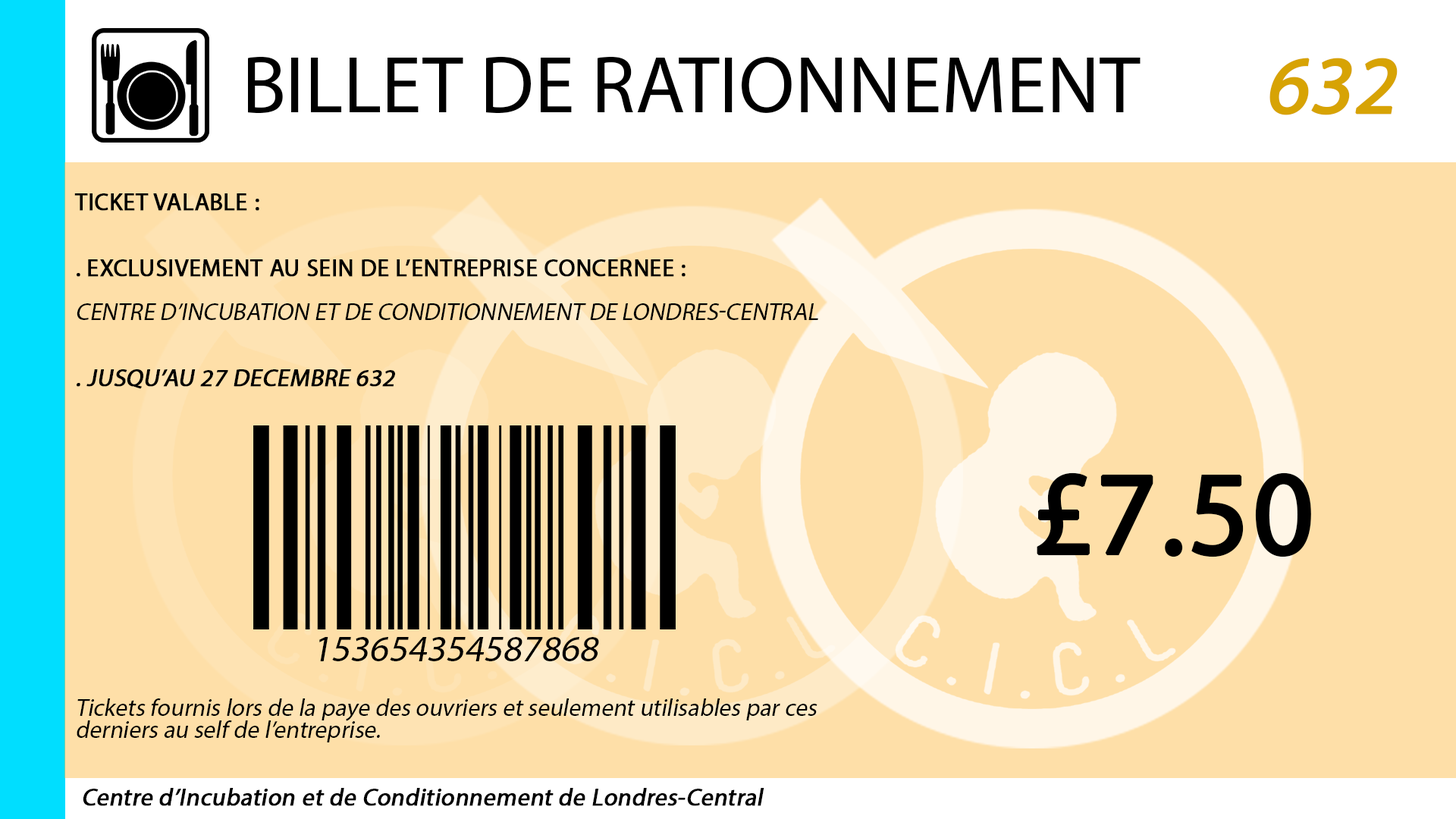
<style>
.page{position:relative;width:1456px;height:819px;background:#fedfa8}
.page>*{position:absolute;margin:0}
.t1{font:81.1px "MyriadPro-Regular";color:#000000}
.t2{font:81.1px "MyriadPro-Regular";color:#d7a304;font-weight:bold;font-style:italic}
.t3{font:24.3px/22px "MyriadPro-Regular";color:#000000;font-style:italic}
.t4{font:24.3px/22px "MyriadPro-Regular";color:#000000;font-weight:bold}
.t5{font:24.3px/22px "MyriadPro-Regular";color:#000000;text-transform:uppercase;font-style:italic}
.t6{font:24.3px/22px "MyriadPro-Regular";color:#000000;font-weight:bold;font-style:italic}
.t7{font:119.1px "MyriadPro-Regular";color:#000000;font-weight:bold}
.t8{font:37.2px "MyriadPro-Regular";color:#000000;font-style:italic}
.t9{font:24.3px "MyriadPro-Regular";color:#000000;font-weight:bold;font-style:italic}
</style>
<div class="page">
<p class="t1" style="left:248px;top:56px;width:893px;height:58px">BILLET DE RATIONNEMENT</p>
<p class="t2" style="left:1269px;top:58px;width:129px;height:57px">632</p>
<p class="t3" style="left:74px;top:193px;width:744px;height:549px"><span class="t4">TICKET VALABLE :<br><br><br>. EXCLUSIVEMENT AU SEIN DE L’ENTREPRISE CONCERNEE : <br><br></span><span class="t5">Centre d’Incubation et de Conditionnement de Londres-Central<br></span><span class="t6"><br><br>. JUSQU’AU 27 DECEMBRE 632<br><br><br><br><br><br><br><br><br><br><br><br><br><br><br></span>Tickets fournis lors de la paye des ouvriers et seulement utilisables par ces derniers au self de l’entreprise.</p>
<p class="t7" style="left:1037px;top:472px;width:274px;height:85px">£7.50</p>
<p class="t8" style="left:319px;top:637px;width:280px;height:24px">153654354587868</p>
<p class="t9" style="left:83px;top:788px;width:681px;height:18px">Centre d’Incubation et de Conditionnement de Londres-Central</p>
</div>
